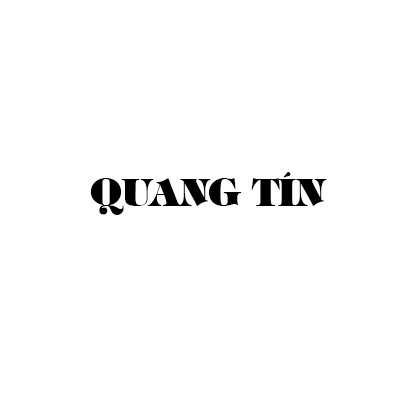
<style>
.page{position:relative;width:400px;height:400px;background:#ffffff}
.page>*{position:absolute;margin:0}
.t1{font:36px "Tiffany-Heavy-Bold";color:#000000}
</style>
<div class="page">
<p class="t1" style="left:90px;top:172px;width:237px;height:43px">QUANG TÍN</p>
</div>
